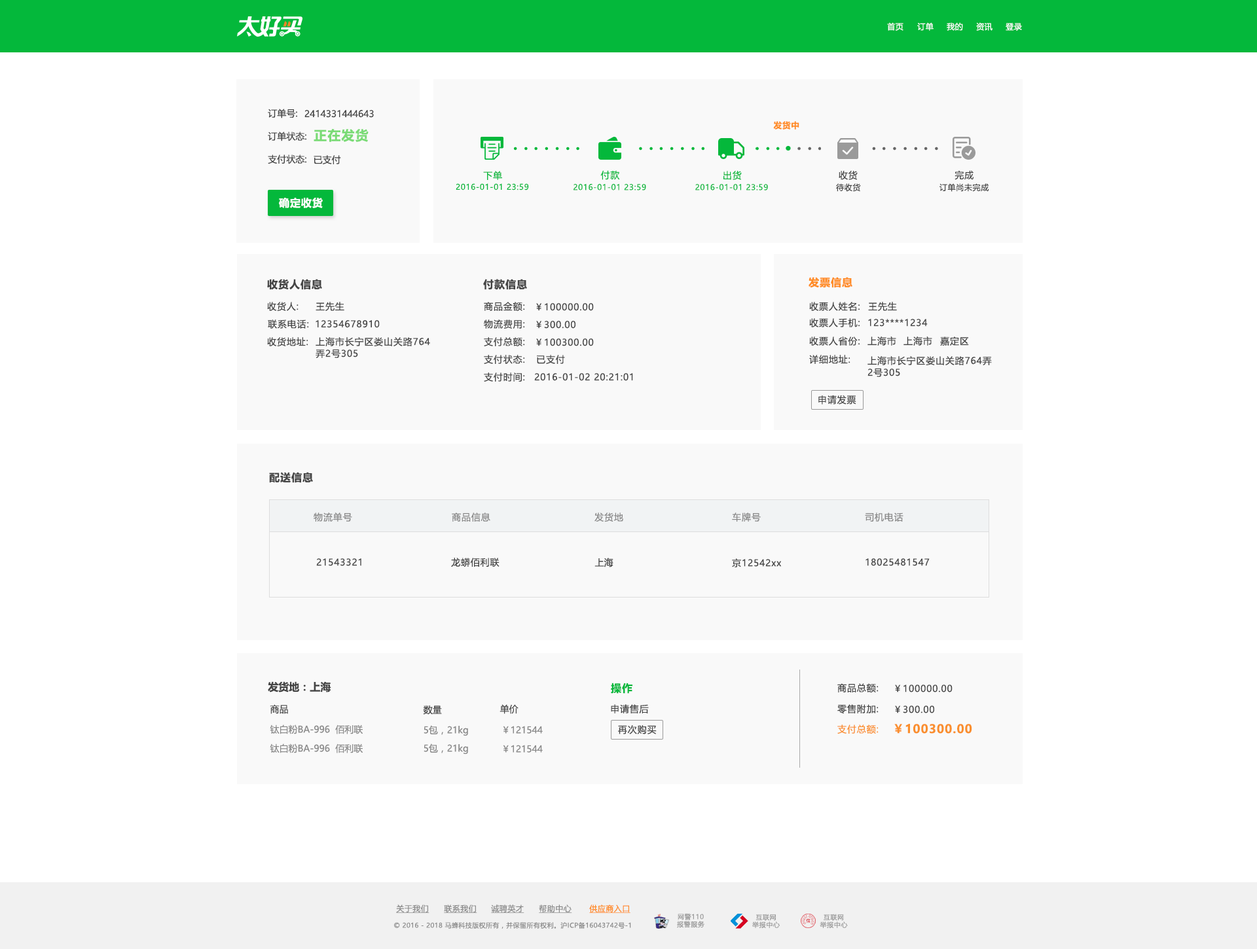
<style>
.page{position:relative;width:1257px;height:949px;background:#ffffff}
.page>*{position:absolute;margin:0}
.t1{font:7.9px "MicrosoftYaHeiUI";letter-spacing:0.04em;color:#ffffff}
.t2{font:9.2px "MicrosoftYaHeiUI";color:#444444}
.t3{font:8.3px "MicrosoftYaHeiUI-Bold";letter-spacing:0.06em;color:#ff8d27}
.t4{font:13.1px "MicrosoftYaHeiUI-Bold";letter-spacing:0.06em;color:#7adb76}
.t5{font:9.2px "MicrosoftYaHeiUI";letter-spacing:0.06em;color:#04b83b}
.t6{font:9.2px "MicrosoftYaHeiUI";letter-spacing:0.06em;color:#444444}
.t7{font:7.9px "MicrosoftYaHeiUI";letter-spacing:0.06em;color:#04b83b}
.t8{font:7.9px "MicrosoftYaHeiUI";letter-spacing:0.06em;color:#444444}
.t9{font:10.5px "MicrosoftYaHeiUI-Bold";letter-spacing:0.06em;color:#ffffff}
.t10{font:10.5px "MicrosoftYaHeiUI-Bold";letter-spacing:0.06em;color:#444444}
.t11{font:10.5px "MicrosoftYaHeiUI-Bold";letter-spacing:0.06em;color:#ff8d27}
.t12{font:9.2px/11.8px "MicrosoftYaHeiUI";letter-spacing:0.06em;color:#444444}
.t13{font:9.2px "MicrosoftYaHeiUI";letter-spacing:0.06em;color:#888888}
.t14{font:10.5px "MicrosoftYaHeiUI-Bold";color:#444444}
.t15{font:10.5px "MicrosoftYaHeiUI-Bold";letter-spacing:0.06em;color:#04b83b}
.t16{font:9.2px "MicrosoftYaHeiUI";color:#8a8a8a}
.t17{font:9.2px "MicrosoftYaHeiUI";letter-spacing:0.06em;color:#fa8f2e}
.t18{font:11.8px "MicrosoftYaHeiUI-Bold";letter-spacing:0.06em;color:#fa8f2e}
.t19{font:7.9px "MicrosoftYaHeiUI";letter-spacing:0.04em;color:#8c8c8c;text-decoration:underline}
.t20{font:7.9px "MicrosoftYaHeiUI";letter-spacing:0.04em;color:#ff8b25;text-decoration:underline}
.t21{font:6.5px/7.6px "MicrosoftYaHei";letter-spacing:0.06em;color:#999999}
.t22{font:6.5px "MicrosoftYaHeiUI";letter-spacing:0.04em;color:#8c8c8c}
</style>
<div class="page">
<p class="t1" style="left:887px;top:22px;width:16px;height:9px">首页</p>
<p class="t1" style="left:917px;top:22px;width:16px;height:9px">订单</p>
<p class="t1" style="left:946px;top:22px;width:17px;height:9px">我的</p>
<p class="t1" style="left:976px;top:22px;width:16px;height:9px">资讯</p>
<p class="t1" style="left:1005px;top:23px;width:17px;height:8px">登录</p>
<p class="t2" style="left:268px;top:109px;width:29px;height:9px">订单号:</p>
<p class="t2" style="left:304px;top:110px;width:70px;height:8px">2414331444643</p>
<p class="t3" style="left:773px;top:121px;width:26px;height:9px">发货中</p>
<p class="t2" style="left:268px;top:132px;width:38px;height:9px">订单状态:</p>
<p class="t4" style="left:313px;top:129px;width:55px;height:13px">正在发货</p>
<p class="t2" style="left:268px;top:154px;width:38px;height:10px">支付状态:</p>
<p class="t2" style="left:313px;top:155px;width:28px;height:9px">已支付</p>
<p class="t5" style="left:483px;top:171px;width:19px;height:9px">下单</p>
<p class="t5" style="left:600px;top:170px;width:20px;height:10px">付款</p>
<p class="t5" style="left:723px;top:171px;width:19px;height:9px">出货</p>
<p class="t6" style="left:838px;top:170px;width:19px;height:10px">收货</p>
<p class="t6" style="left:954px;top:170px;width:19px;height:10px">完成</p>
<p class="t7" style="left:456px;top:183px;width:73px;height:7px">2016-01-01 23:59</p>
<p class="t7" style="left:573px;top:184px;width:73px;height:6px">2016-01-01 23:59</p>
<p class="t7" style="left:695px;top:184px;width:73px;height:6px">2016-01-01 23:59</p>
<p class="t8" style="left:836px;top:183px;width:25px;height:9px">待收货</p>
<p class="t8" style="left:939px;top:183px;width:50px;height:9px">订单尚未完成</p>
<p class="t9" style="left:279px;top:198px;width:44px;height:10px">确定收货</p>
<p class="t10" style="left:267px;top:279px;width:55px;height:11px">收货人信息</p>
<p class="t10" style="left:483px;top:279px;width:44px;height:11px">付款信息</p>
<p class="t11" style="left:808px;top:277px;width:44px;height:11px">发票信息</p>
<p class="t6" style="left:267px;top:302px;width:31px;height:10px">收货人:</p>
<p class="t6" style="left:315px;top:302px;width:29px;height:9px">王先生</p>
<p class="t6" style="left:484px;top:302px;width:41px;height:10px">商品金额:</p>
<p class="t6" style="left:536px;top:303px;width:58px;height:8px">￥100000.00</p>
<p class="t6" style="left:809px;top:302px;width:50px;height:9px">收票人姓名:</p>
<p class="t6" style="left:868px;top:302px;width:29px;height:9px">王先生</p>
<p class="t6" style="left:268px;top:319px;width:41px;height:10px">联系电话:</p>
<p class="t6" style="left:315px;top:320px;width:65px;height:8px">12354678910</p>
<p class="t6" style="left:484px;top:319px;width:41px;height:10px">物流费用:</p>
<p class="t6" style="left:536px;top:321px;width:39px;height:8px">￥300.00</p>
<p class="t6" style="left:809px;top:318px;width:50px;height:10px">收票人手机:</p>
<p class="t6" style="left:868px;top:319px;width:59px;height:8px">123****1234</p>
<p class="t6" style="left:267px;top:337px;width:41px;height:10px">收货地址:</p>
<p class="t12" style="left:315px;top:337px;width:115px;height:21px">上海市长宁区娄山关路764<br>弄2号305</p>
<p class="t6" style="left:484px;top:337px;width:41px;height:10px">支付总额:</p>
<p class="t6" style="left:536px;top:338px;width:58px;height:8px">￥100300.00</p>
<p class="t6" style="left:809px;top:336px;width:50px;height:10px">收票人省份:</p>
<p class="t6" style="left:867px;top:336px;width:29px;height:10px">上海市</p>
<p class="t6" style="left:903px;top:336px;width:29px;height:10px">上海市</p>
<p class="t6" style="left:940px;top:336px;width:29px;height:10px">嘉定区</p>
<p class="t6" style="left:484px;top:355px;width:41px;height:10px">支付状态:</p>
<p class="t6" style="left:537px;top:355px;width:28px;height:10px">已支付</p>
<p class="t6" style="left:809px;top:355px;width:41px;height:9px">详细地址:</p>
<p class="t12" style="left:867px;top:356px;width:125px;height:21px">上海市长宁区娄山关路764弄<br>2号305</p>
<p class="t6" style="left:484px;top:372px;width:41px;height:10px">支付时间:</p>
<p class="t6" style="left:534px;top:373px;width:99px;height:8px">2016-01-02 20:21:01</p>
<p class="t6" style="left:818px;top:395px;width:38px;height:9px">申请发票</p>
<p class="t10" style="left:269px;top:472px;width:44px;height:11px">配送信息</p>
<p class="t13" style="left:313px;top:512px;width:39px;height:10px">物流单号</p>
<p class="t13" style="left:452px;top:512px;width:38px;height:10px">商品信息</p>
<p class="t13" style="left:594px;top:512px;width:29px;height:10px">发货地</p>
<p class="t13" style="left:732px;top:512px;width:28px;height:10px">车牌号</p>
<p class="t13" style="left:865px;top:512px;width:38px;height:10px">司机电话</p>
<p class="t6" style="left:451px;top:558px;width:48px;height:9px">龙蟒佰利联</p>
<p class="t2" style="left:594px;top:558px;width:19px;height:9px">上海</p>
<p class="t6" style="left:316px;top:558px;width:45px;height:8px">21543321</p>
<p class="t6" style="left:732px;top:558px;width:49px;height:9px">京12542xx</p>
<p class="t6" style="left:865px;top:558px;width:64px;height:8px">18025481547</p>
<p class="t14" style="left:268px;top:681px;width:63px;height:11px">发货地：上海</p>
<p class="t15" style="left:611px;top:683px;width:21px;height:11px">操作</p>
<p class="t6" style="left:837px;top:683px;width:41px;height:10px">商品总额:</p>
<p class="t6" style="left:895px;top:685px;width:57px;height:7px">￥100000.00</p>
<p class="t2" style="left:270px;top:704px;width:18px;height:10px">商品</p>
<p class="t2" style="left:423px;top:705px;width:19px;height:10px">数量</p>
<p class="t2" style="left:499px;top:704px;width:19px;height:10px">单价</p>
<p class="t6" style="left:611px;top:704px;width:38px;height:9px">申请售后</p>
<p class="t6" style="left:837px;top:704px;width:41px;height:10px">零售附加:</p>
<p class="t6" style="left:895px;top:706px;width:39px;height:7px">￥300.00</p>
<p class="t16" style="left:270px;top:724px;width:93px;height:10px">钛白粉BA-996  佰利联</p>
<p class="t16" style="left:423px;top:725px;width:45px;height:11px">5包，21kg</p>
<p class="t16" style="left:503px;top:726px;width:40px;height:8px">￥121544</p>
<p class="t6" style="left:618px;top:725px;width:38px;height:9px">再次购买</p>
<p class="t17" style="left:837px;top:724px;width:41px;height:10px">支付总额:</p>
<p class="t18" style="left:894px;top:724px;width:78px;height:10px">￥100300.00</p>
<p class="t16" style="left:270px;top:743px;width:93px;height:10px">钛白粉BA-996  佰利联</p>
<p class="t16" style="left:423px;top:743px;width:45px;height:11px">5包，21kg</p>
<p class="t16" style="left:503px;top:745px;width:40px;height:8px">￥121544</p>
<p class="t19" style="left:396px;top:904px;width:33px;height:9px">关于我们</p>
<p class="t19" style="left:444px;top:904px;width:33px;height:9px">联系我们</p>
<p class="t19" style="left:491px;top:904px;width:33px;height:9px">诚聘英才</p>
<p class="t19" style="left:539px;top:904px;width:33px;height:9px">帮助中心</p>
<p class="t20" style="left:589px;top:904px;width:41px;height:9px">供应商入口</p>
<p class="t21" style="left:677px;top:913px;width:27px;height:15px;text-align:center">网警110<br>报警服务</p>
<p class="t21" style="left:752px;top:914px;width:27px;height:14px;text-align:center">互联网<br>举报中心</p>
<p class="t21" style="left:819px;top:914px;width:29px;height:14px;text-align:center">互联网<br>举报中心</p>
<p class="t22" style="left:394px;top:921px;width:237px;height:8px">© 2016 - 2018 马蜂科技版权所有，并保留所有权利。沪ICP备16043742号-1</p>
</div>
